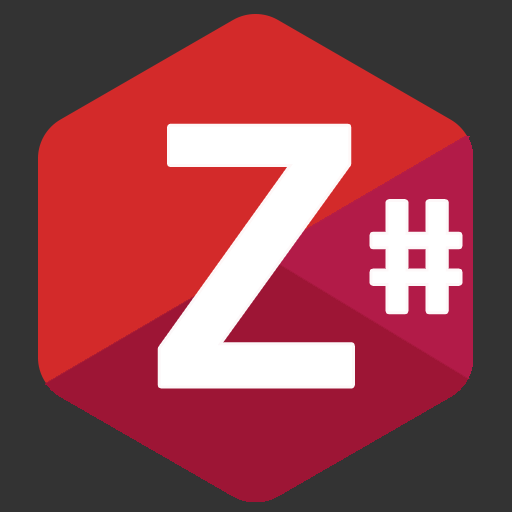
<style>
.page{position:relative;width:512px;height:512px;background:#333333}
.page>*{position:absolute;margin:0}
.t1{font:388px "FranklinGothic-Medium";color:#ffffff}
.t2{font:134.9px "Unispace-Bold";color:#ffffff;scale:1.38 1}
</style>
<div class="page">
<p class="t1" style="left:160px;top:126px;width:192px;height:260px">Z</p>
<p class="t2" style="left:372px;top:202px;width:88px;height:110px">#</p>
</div>
